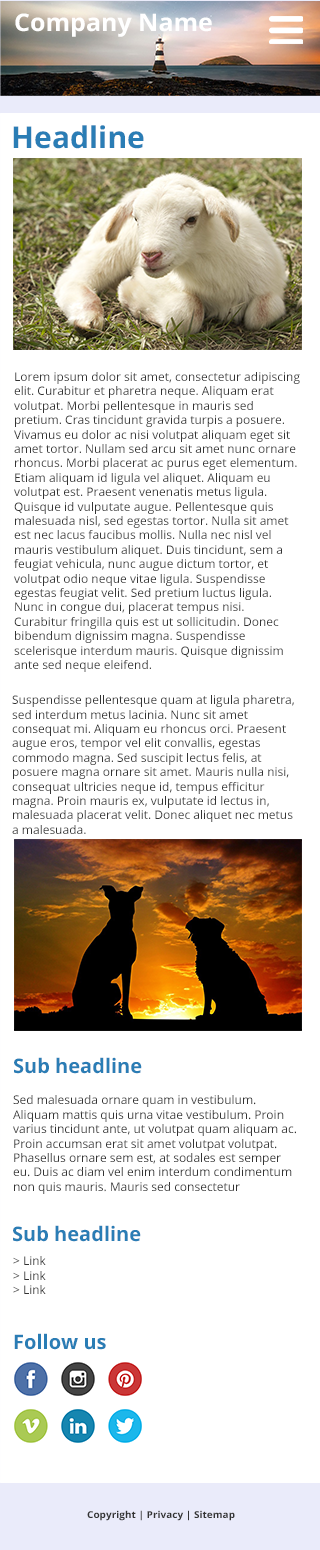
<style>
.page{position:relative;width:320px;height:1550px;background:#ffffff}
.page>*{position:absolute;margin:0}
.t1{font:24.3px "OpenSans-Bold";color:#ffffff}
.t2{font:30px "OpenSans-Bold";color:#2a7db5}
.t3{font:12px "OpenSans";color:#333333}
.t4{font:20px "OpenSans-Bold";color:#2a7db5}
.t5{font:9.6px "OpenSans-Bold";color:#333333;scale:1.05 1}
</style>
<div class="page">
<p class="t1" style="left:15px;top:13px;width:197px;height:24px">Company Name</p>
<p class="t2" style="left:13px;top:125px;width:131px;height:24px">Headline</p>
<p class="t3" style="left:14px;top:372px;width:286px;height:300px">Lorem ipsum dolor sit amet, consectetur adipiscing elit. Curabitur et pharetra neque. Aliquam erat volutpat. Morbi pellentesque in mauris sed pretium. Cras tincidunt gravida turpis a posuere. Vivamus eu dolor ac nisi volutpat aliquam eget sit amet tortor. Nullam sed arcu sit amet nunc ornare rhoncus. Morbi placerat ac purus eget elementum. Etiam aliquam id ligula vel aliquet. Aliquam eu volutpat est. Praesent venenatis metus ligula. Quisque id vulputate augue. Pellentesque quis malesuada nisl, sed egestas tortor. Nulla sit amet est nec lacus faucibus mollis. Nulla nec nisl vel mauris vestibulum aliquet. Duis tincidunt, sem a feugiat vehicula, nunc augue dictum tortor, et volutpat odio neque vitae ligula. Suspendisse egestas feugiat velit. Sed pretium luctus ligula. Nunc in congue dui, placerat tempus nisi. Curabitur fringilla quis est ut sollicitudin. Donec bibendum dignissim magna. Suspendisse scelerisque interdum mauris. Quisque dignissim ante sed neque eleifend.</p>
<p class="t3" style="left:12px;top:695px;width:282px;height:139px">Suspendisse pellentesque quam at ligula pharetra, sed interdum metus lacinia. Nunc sit amet consequat mi. Aliquam eu rhoncus orci. Praesent augue eros, tempor vel elit convallis, egestas commodo magna. Sed suscipit lectus felis, at posuere magna ornare sit amet. Mauris nulla nisi, consequat ultricies neque id, tempus efficitur magna. Proin mauris ex, vulputate id lectus in, malesuada placerat velit. Donec aliquet nec metus a malesuada.</p>
<p class="t4" style="left:14px;top:1057px;width:128px;height:17px">Sub headline</p>
<p class="t3" style="left:13px;top:1095px;width:283px;height:99px">Sed malesuada ornare quam in vestibulum. Aliquam mattis quis urna vitae vestibulum. Proin varius tincidunt ante, ut volutpat quam aliquam ac. Proin accumsan erat sit amet volutpat volutpat. Phasellus ornare sem est, at sodales est semper eu. Duis ac diam vel enim interdum condimentum non quis mauris. Mauris sed consectetur</p>
<p class="t4" style="left:13px;top:1225px;width:128px;height:17px">Sub headline</p>
<p class="t3" style="left:13px;top:1256px;width:33px;height:38px">&gt; Link<br>&gt; Link<br>&gt; Link</p>
<p class="t4" style="left:14px;top:1333px;width:92px;height:17px">Follow us</p>
<p class="t5" style="left:87px;top:1510px;width:148px;height:11px">Copyright | Privacy | Sitemap</p>
</div>
